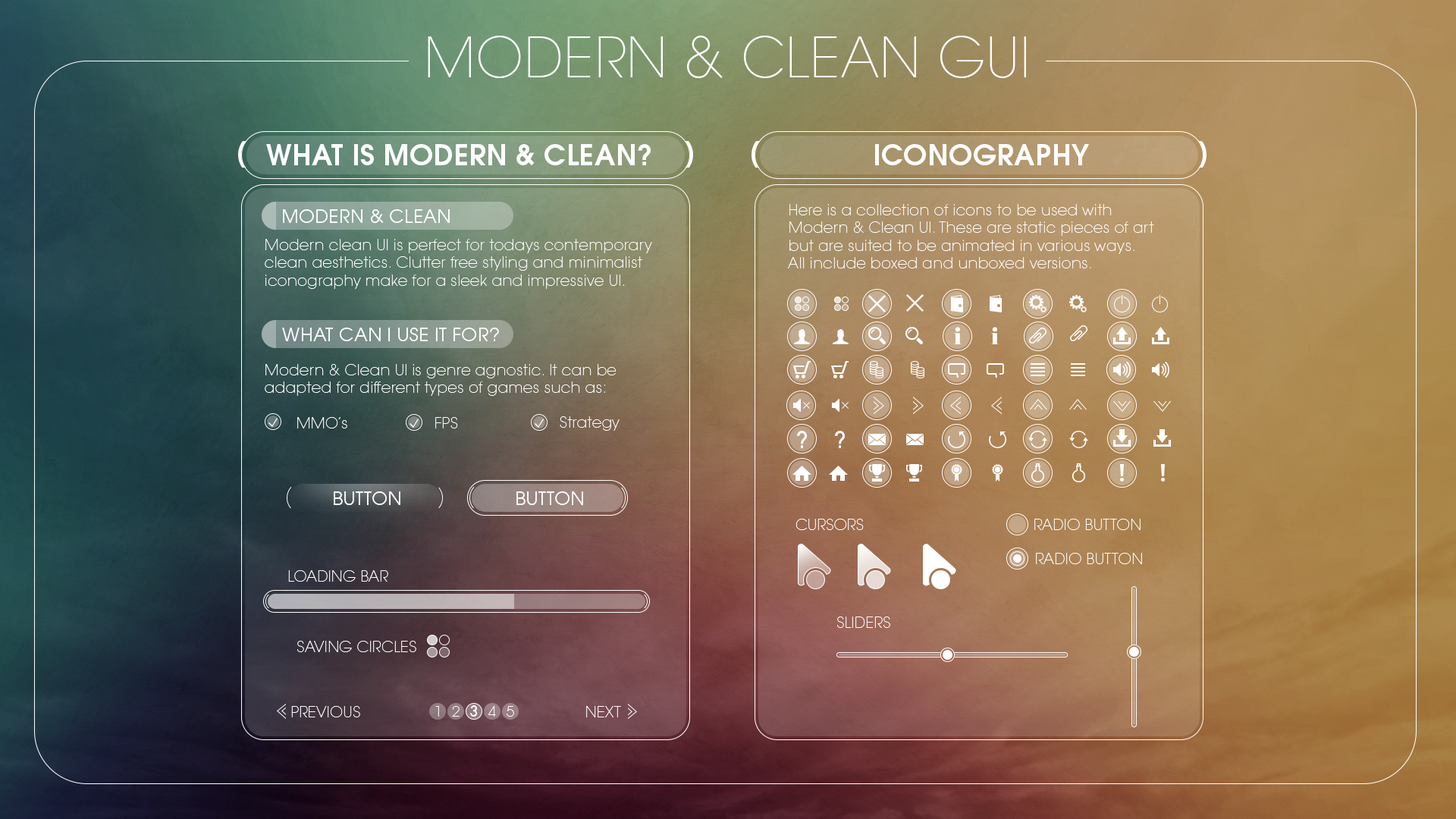
<style>
.page{position:relative;width:1456px;height:819px}
.page>*{position:absolute;margin:0}
.t1{font:54.9px "ITCAvantGardePro-XLt";letter-spacing:0.02em;color:#ffffff;text-transform:uppercase}
.t2{font:28.1px "ITCAvantGardePro-Demi";letter-spacing:0.02em;color:#ffffff;text-transform:uppercase}
.t3{font:18.2px "ITCAvantGardePro-Bk";letter-spacing:0.02em;color:#ffffff;text-transform:uppercase}
.t4{font:15.2px/17.6px "ITCAvantGardePro-XLt";letter-spacing:0.02em;color:#ffffff}
.t5{font:23.4px "AbrilFatface-Regular";letter-spacing:0.02em;color:#ffffff}
.t6{font:15.2px "ITCAvantGardePro-XLt";letter-spacing:0.02em;color:#ffffff}
.t7{font:22.6px "ITCAvantGardePro-Md";letter-spacing:0.02em;color:#ffffff;text-transform:uppercase}
.t8{font:15.2px "ITCAvantGardePro-XLt";letter-spacing:0.02em;color:#ffffff;text-transform:uppercase}
.t9{font:14.4px "ITCAvantGardePro-XLt";letter-spacing:0.02em;color:#ffffff}
.t10{font:14.4px "ITCAvantGardePro-Md";letter-spacing:0.02em;color:#ffffff}
</style>
<div class="page">
<p class="t1" style="left:428px;top:36px;width:598px;height:42px">modern &amp; clean gui</p>
<p class="t2" style="left:266px;top:144px;width:385px;height:21px">what is modern &amp; CLEAN?</p>
<p class="t2" style="left:875px;top:144px;width:214px;height:21px">iconography</p>
<p class="t3" style="left:283px;top:209px;width:167px;height:14px">modern &amp; clean</p>
<p class="t4" style="left:788px;top:204px;width:366px;height:64px">Here is a collection of icons to be used with <br>Modern &amp; Clean UI. These are static pieces of art<br>but are suited to be animated in various ways.<br>All include boxed and unboxed versions.</p>
<p class="t4" style="left:265px;top:239px;width:387px;height:50px">Modern clean UI is perfect for todays contemporary<br>clean aesthetics. Clutter free styling and minimalist<br>iconography make for a sleek and impressive UI.</p>
<p class="t3" style="left:282px;top:328px;width:217px;height:13px">what can i use it for?</p>
<p class="t5" style="left:954px;top:327px;width:8px;height:17px">i</p>
<p class="t5" style="left:991px;top:327px;width:8px;height:17px">i</p>
<p class="t4" style="left:265px;top:364px;width:352px;height:32px">Modern &amp; Clean UI is genre agnostic. It can be <br>adapted for different types of games such as:</p>
<p class="t6" style="left:297px;top:417px;width:50px;height:11px">MMO’s</p>
<p class="t6" style="left:435px;top:417px;width:23px;height:11px">FPS</p>
<p class="t6" style="left:560px;top:416px;width:60px;height:15px">Strategy</p>
<p class="t7" style="left:797px;top:431px;width:10px;height:17px">?</p>
<p class="t7" style="left:835px;top:431px;width:10px;height:17px">?</p>
<p class="t3" style="left:334px;top:491px;width:66px;height:14px">BUTTON</p>
<p class="t3" style="left:516px;top:491px;width:67px;height:14px">BUTTON</p>
<p class="t8" style="left:795px;top:519px;width:69px;height:11px">Cursors</p>
<p class="t8" style="left:1034px;top:519px;width:107px;height:11px">Radio button</p>
<p class="t8" style="left:1036px;top:553px;width:106px;height:11px">Radio button</p>
<p class="t8" style="left:288px;top:570px;width:100px;height:12px">loading bar</p>
<p class="t8" style="left:837px;top:617px;width:53px;height:11px">sliders</p>
<p class="t8" style="left:297px;top:641px;width:119px;height:11px">SAVING CIRCLES</p>
<p class="t6" style="left:291px;top:706px;width:69px;height:11px">PREVIOUS</p>
<p class="t9" style="left:435px;top:706px;width:4px;height:11px">1</p>
<p class="t9" style="left:452px;top:706px;width:8px;height:11px">2</p>
<p class="t10" style="left:470px;top:705px;width:8px;height:12px">3</p>
<p class="t9" style="left:488px;top:706px;width:8px;height:11px">4</p>
<p class="t9" style="left:507px;top:706px;width:7px;height:11px">5</p>
<p class="t6" style="left:586px;top:706px;width:35px;height:11px">NEXT</p>
</div>
